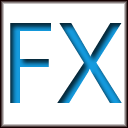
<style>
.page{position:relative;width:128px;height:128px;background:#ffffff}
.page>*{position:absolute;margin:0}
.t1{font:114px "Gadugi"}
</style>
<div class="page">
<p class="t1" style="left:10px;top:23px;width:112px;height:80px">FX</p>
</div>
